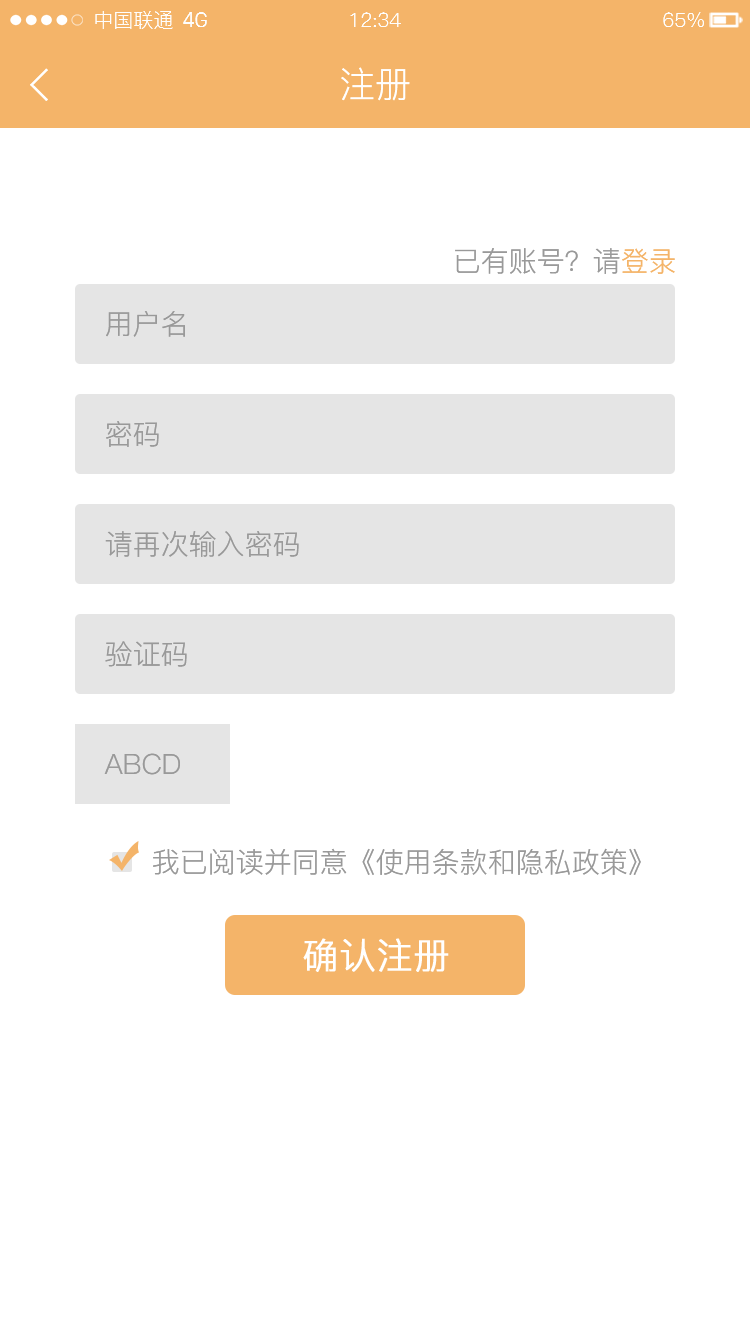
<style>
.page{position:relative;width:750px;height:1334px;background:#ffffff}
.page>*{position:absolute;margin:0}
.t1{font:20px "PingFang-SC-Regular";color:#fefefe}
.t2{font:20px "SanFranciscoDisplay";color:#fefefe}
.t3{font:36px "PingFang-SC-Regular";color:#ffffff}
.t4{font:28px "PingFang-SC-Regular";color:#999999}
.t5{font:28px "PingFang-SC-Regular";color:#f4b469}
.t6{font:36px "PingFang-SC-Regular";color:#ffffff;font-weight:bold}
</style>
<div class="page">
<p class="t1" style="left:95px;top:11px;width:78px;height:18px">中国联通</p>
<p class="t2" style="left:183px;top:12px;width:24px;height:15px">4G</p>
<p class="t1" style="left:350px;top:12px;width:51px;height:15px">12:34</p>
<p class="t1" style="left:663px;top:12px;width:41px;height:15px">65%</p>
<p class="t3" style="left:341px;top:67px;width:69px;height:34px">注册</p>
<p class="t4" style="left:455px;top:248px;width:220px;height:26px">已有账号？请<span class="t5">登录</span></p>
<p class="t4" style="left:106px;top:311px;width:79px;height:26px">用户名</p>
<p class="t4" style="left:106px;top:421px;width:53px;height:26px">密码</p>
<p class="t4" style="left:105px;top:531px;width:194px;height:26px">请再次输入密码</p>
<p class="t4" style="left:105px;top:641px;width:82px;height:26px">验证码</p>
<p class="t4" style="left:104px;top:753px;width:76px;height:22px">ABCD</p>
<p class="t4" style="left:153px;top:848px;width:488px;height:27px">我已阅读并同意《使用条款和隐私政策》</p>
<p class="t6" style="left:303px;top:938px;width:146px;height:34px">确认注册</p>
</div>
